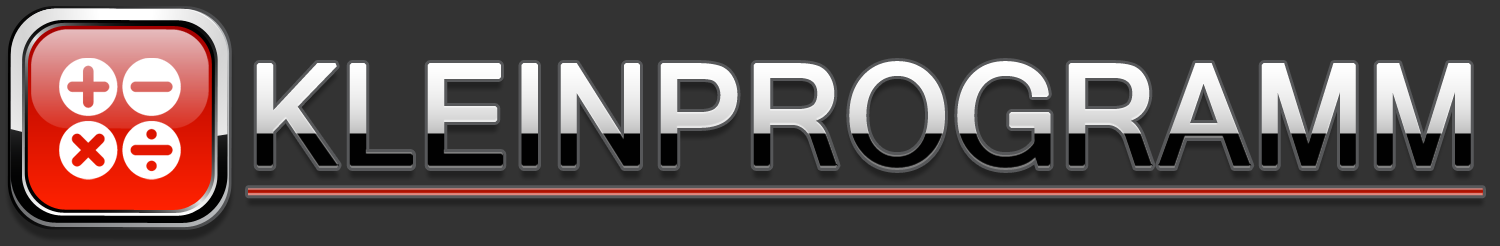
<style>
.page{position:relative;width:1500px;height:246px;background:#333333}
.page>*{position:absolute;margin:0}
.t1{font:140.6px "MicrosoftSansSerif";text-transform:uppercase;font-weight:bold;text-decoration:underline;scale:0.95 1}
</style>
<div class="page">
<p class="t1" style="left:248px;top:61px;width:1235px;height:135px">KLEINPROGRAMM</p>
</div>
